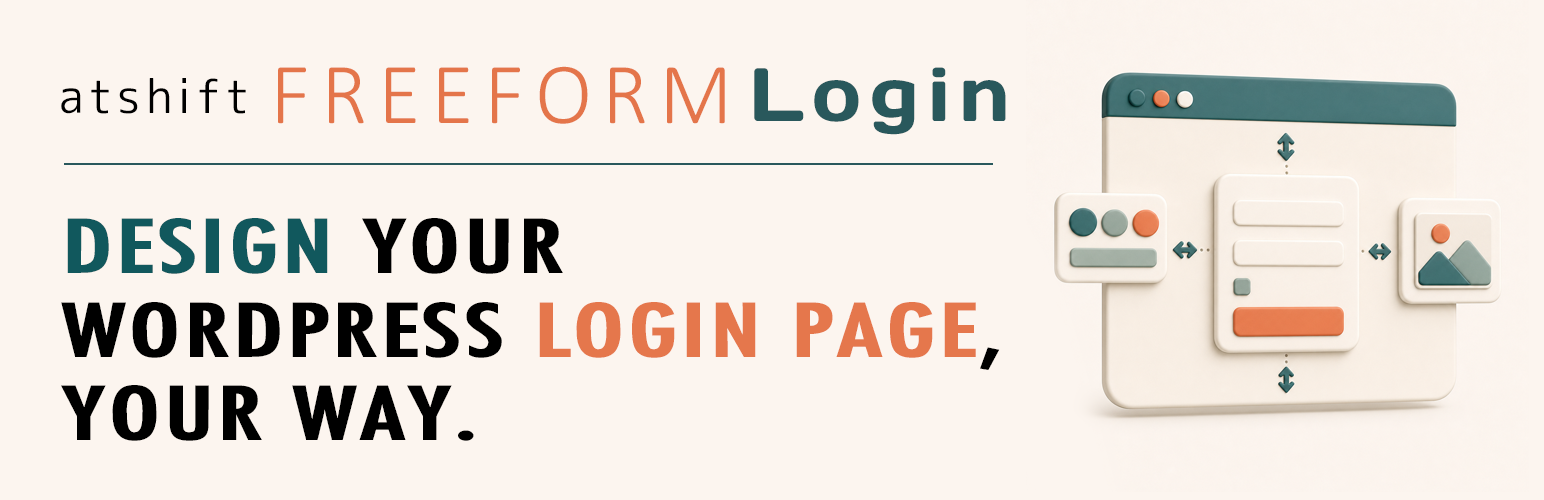
<style>
.page{position:relative;width:1544px;height:500px;background:#fcf5ef}
.page>*{position:absolute;margin:0}
.t1{font:87.8px "Calibri-Light";letter-spacing:0.12em;color:#e4754a}
.t2{font:45.5px "07YasashisaGothic";letter-spacing:0.12em;color:#000000}
.t3{font:75.2px "Days";letter-spacing:0.12em;color:#29585c}
.t4{font:69.4px/83.4px "FujiExtendedBold";letter-spacing:0.08em;color:#000000}
.t5{font:69.4px/83.4px "FujiExtendedBold";letter-spacing:0.08em;color:#11585d}
.t6{font:69.4px/83.4px "FujiExtendedBold";letter-spacing:0.08em;color:#e5774c}
</style>
<div class="page">
<p class="t1" style="left:61px;top:66px;width:945px;height:69px"><span class="t2">atshift </span>FREEFORM <span class="t3">Login</span></p>
<p class="t4" style="left:61px;top:218px;width:939px;height:223px"><span class="t5">DESIGN</span> YOUR<br>WORDPRESS <span class="t6">LOGIN PAGE</span>,<br>YOUR WAY.</p>
</div>
